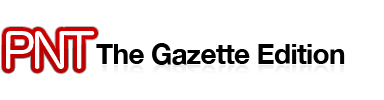
<style>
.page{position:relative;width:384px;height:100px;background:#ffffff}
.page>*{position:absolute;margin:0}
.t1{font:48px "HiraMaruProN-W4";letter-spacing:-0.1em;color:#ffffff}
.t2{font:28px "HelveticaNeue-Bold";letter-spacing:-0.025em;color:#000000}
</style>
<div class="page">
<p class="t1" style="left:6px;top:31px;width:89px;height:38px">PNT</p>
<p class="t1" style="left:6px;top:31px;width:89px;height:38px">PNT</p>
<p class="t2" style="left:96px;top:43px;width:249px;height:22px">The Gazette Edition</p>
</div>
